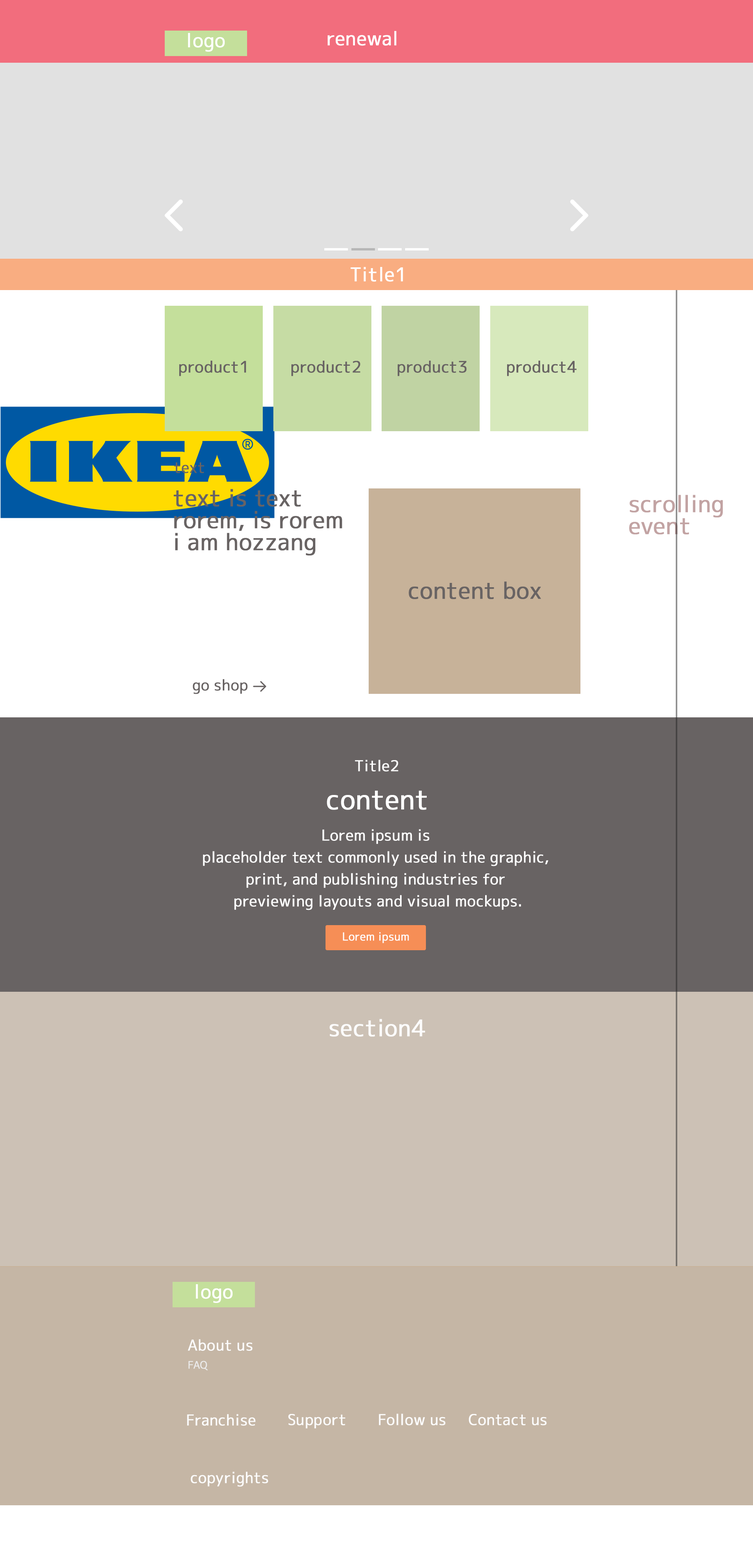
<style>
.page{position:relative;width:753px;height:1568px}
.page>*{position:absolute;margin:0}
.t1{font:18.8px "SquarePlus";color:#ffffff;font-weight:bold}
.t2{font:15.7px "SquarePlus";color:#686363;font-weight:bold}
.t3{font:14.9px "SquarePlus";color:#686363;font-weight:bold}
.t4{font:22.7px/22px "SquarePlus";color:#686363;font-weight:bold}
.t5{font:22.7px/22px "SquarePlus";color:#c2a3a3;font-weight:bold}
.t6{font:22.7px "SquarePlus";color:#686363;font-weight:bold}
.t7{font:14.9px "SquarePlus";color:#ffffff;font-weight:bold}
.t8{font:26.7px "SquarePlus";color:#ffffff;font-weight:bold}
.t9{font:14.9px/22px "SquarePlus";color:#ffffff;font-weight:bold}
.t10{font:11px "SquarePlus";color:#ffffff;font-weight:bold}
.t11{font:22.7px "SquarePlus";color:#fcfcfc;font-weight:bold}
.t12{font:14.9px "SquarePlus";color:#fcfcfc;font-weight:bold}
.t13{font:10.2px "SquarePlus";color:#ebebeb;font-weight:bold}
</style>
<div class="page">
<p class="t1" style="left:188px;top:33px;width:37px;height:19px">logo</p>
<p class="t1" style="left:327px;top:31px;width:69px;height:15px">renewal</p>
<p class="t1" style="left:350px;top:267px;width:53px;height:15px">Title1</p>
<p class="t2" style="left:179px;top:361px;width:67px;height:15px">product1</p>
<p class="t2" style="left:291px;top:361px;width:69px;height:15px">product2</p>
<p class="t2" style="left:397px;top:361px;width:69px;height:15px">product3</p>
<p class="t2" style="left:507px;top:361px;width:69px;height:15px">product4</p>
<p class="t3" style="left:174px;top:462px;width:30px;height:11px">text</p>
<p class="t4" style="left:174px;top:489px;width:168px;height:66px">text is text<br>rorem, is rorem<br>i am hozzang</p>
<p class="t5" style="left:629px;top:495px;width:93px;height:40px">scrolling<br>event</p>
<p class="t6" style="left:408px;top:581px;width:133px;height:18px">content box</p>
<p class="t3" style="left:192px;top:679px;width:55px;height:15px">go shop</p>
<p class="t7" style="left:355px;top:760px;width:43px;height:11px">Title2</p>
<p class="t8" style="left:327px;top:791px;width:99px;height:19px">content</p>
<p class="t9" style="left:203px;top:829px;width:345px;height:81px;text-align:center">Lorem ipsum is <br>placeholder text commonly used in the graphic, <br>print, and publishing industries for <br>previewing layouts and visual mockups.</p>
<p class="t10" style="left:343px;top:932px;width:66px;height:11px">Lorem ipsum</p>
<p class="t11" style="left:329px;top:1019px;width:96px;height:18px">section4</p>
<p class="t1" style="left:196px;top:1284px;width:36px;height:19px">logo</p>
<p class="t12" style="left:188px;top:1339px;width:64px;height:12px">About us</p>
<p class="t13" style="left:188px;top:1361px;width:20px;height:9px">FAQ</p>
<p class="t12" style="left:187px;top:1414px;width:69px;height:12px">Franchise</p>
<p class="t12" style="left:288px;top:1414px;width:57px;height:14px">Support</p>
<p class="t12" style="left:379px;top:1414px;width:66px;height:11px">Follow us</p>
<p class="t12" style="left:468px;top:1414px;width:78px;height:11px">Contact us</p>
<p class="t12" style="left:191px;top:1472px;width:77px;height:15px">copyrights</p>
</div>
